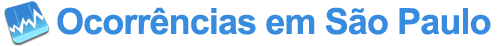
<style>
.page{position:relative;width:500px;height:46px;background:#ffffff}
.page>*{position:absolute;margin:0}
.t1{font:36px "Arial-BoldMT";letter-spacing:-0.025em;color:#388cdf}
</style>
<div class="page">
<p class="t1" style="left:57px;top:7px;width:434px;height:28px">Ocorrências em São Paulo</p>
</div>
